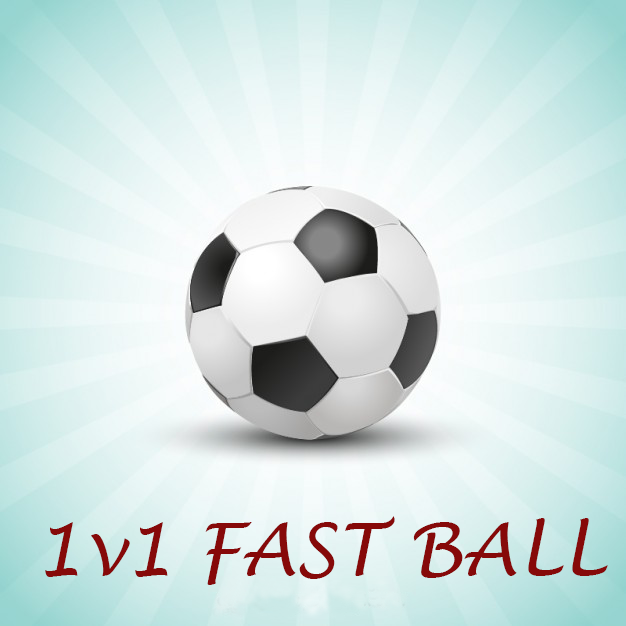
<style>
.page{position:relative;width:626px;height:626px}
.page>*{position:absolute;margin:0}
.t1{font:72px "LucidaHandwriting-Italic";color:#860909}
</style>
<div class="page">
<p class="t1" style="left:45px;top:516px;width:563px;height:69px">1v1 FAST BALL</p>
</div>
